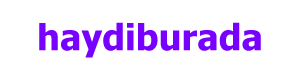
<style>
.page{position:relative;width:300px;height:80px;background:#ffffff}
.page>*{position:absolute;margin:0}
.t1{font:36px "Tahoma-Bold";color:#7800ff}
</style>
<div class="page">
<p class="t1" style="left:39px;top:22px;width:222px;height:36px">haydiburada</p>
</div>
